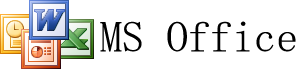
<style>
.page{position:relative;width:300px;height:69px;background:#ffffff}
.page>*{position:absolute;margin:0}
.t1{font:44px "MS-Mincho";color:#000000}
</style>
<div class="page">
<p class="t1" style="left:100px;top:21px;width:196px;height:31px">MS Office</p>
</div>
